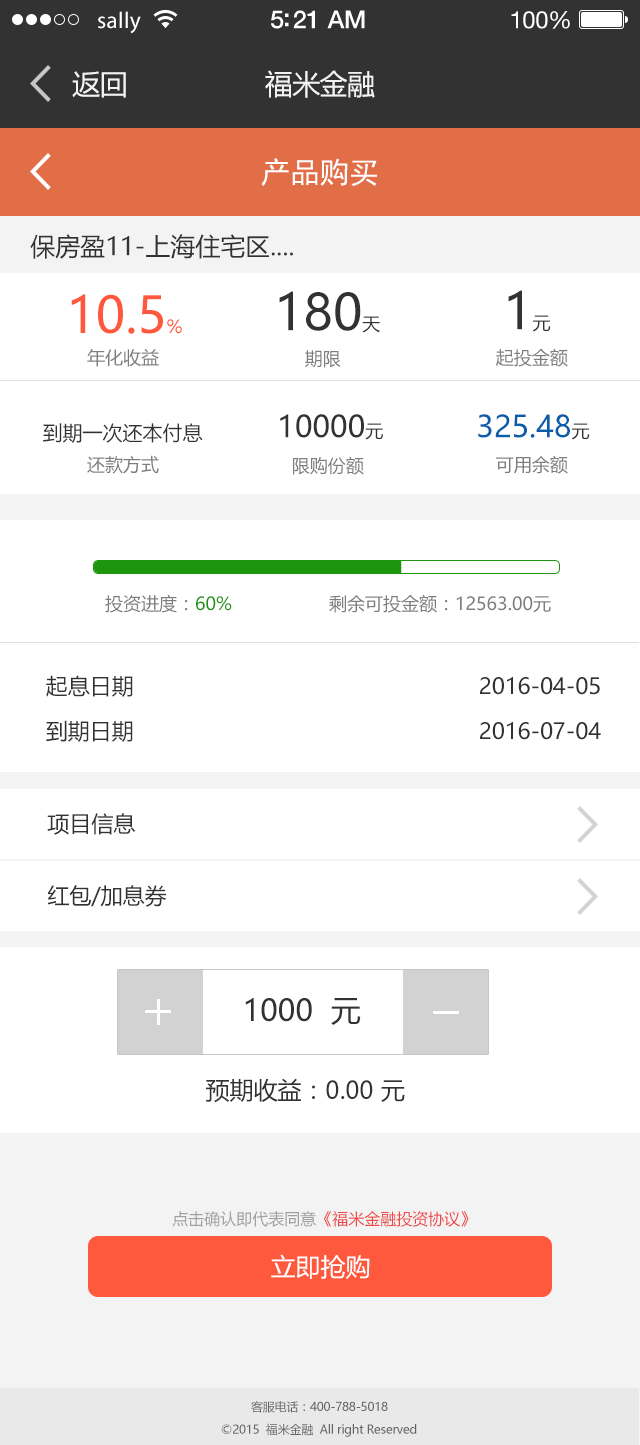
<style>
.page{position:relative;width:640px;height:1445px;background:#ffffff}
.page>*{position:absolute;margin:0}
.t1{font:23px "MyriadPro-Regular";letter-spacing:0.02em;color:#ffffff}
.t2{font:25px "HelveticaNeue-Medium";letter-spacing:-0.02em;color:#ffffff}
.t3{font:24px "HelveticaNeue";letter-spacing:-0.02em;color:#ffffff}
.t4{font:28px "MicrosoftYaHei";letter-spacing:-0.02em;color:#f3f3f3}
.t5{font:30px "SimHei";letter-spacing:-0.02em;color:#ffffff}
.t6{font:25px "MicrosoftYaHei";color:#323232}
.t7{font:50px "MicrosoftYaHei";color:#ff593d}
.t8{font:18px "MicrosoftYaHei";color:#ff593d}
.t9{font:50px "MicrosoftYaHei";color:#323232}
.t10{font:18px "MicrosoftYaHei";color:#323232}
.t11{font:18px "MicrosoftYaHei";color:#7d7d7d}
.t12{font:30px "MicrosoftYaHei";color:#323232}
.t13{font:30px "MicrosoftYaHei";color:#0a5dab}
.t14{font:20px "MicrosoftYaHei";color:#323232}
.t15{font:18px "MicrosoftYaHei";color:#1e950e}
.t16{font:22px "MicrosoftYaHei";color:#323232}
.t17{font:24px "MicrosoftYaHei";color:#323232}
.t18{font:16px "MicrosoftYaHei";color:#ed4949}
.t19{font:16px "MicrosoftYaHei";color:#a0a0a0}
.t20{font:25px "MicrosoftYaHei";color:#ffffff}
.t21{font:12px "MicrosoftYaHei";letter-spacing:-0.02em;color:#646464}
</style>
<div class="page">
<p class="t1" style="left:98px;top:11px;width:43px;height:23px">sally</p>
<p class="t2" style="left:271px;top:10px;width:94px;height:19px">5:21 AM</p>
<p class="t3" style="left:511px;top:11px;width:59px;height:18px">100%</p>
<p class="t4" style="left:72px;top:71px;width:54px;height:27px">返回</p>
<p class="t4" style="left:265px;top:70px;width:110px;height:28px">福米金融</p>
<p class="t5" style="left:261px;top:158px;width:116px;height:28px">产品购买</p>
<p class="t6" style="left:30px;top:234px;width:263px;height:25px">保房盈11-上海住宅区....</p>
<p class="t7" style="left:71px;top:294px;width:111px;height:40px">10.5<span class="t8">%</span></p>
<p class="t9" style="left:279px;top:291px;width:101px;height:42px">180<span class="t10">天</span></p>
<p class="t9" style="left:508px;top:290px;width:43px;height:42px">1<span class="t10">元</span></p>
<p class="t11" style="left:87px;top:349px;width:72px;height:18px">年化收益</p>
<p class="t11" style="left:305px;top:350px;width:36px;height:18px">期限</p>
<p class="t11" style="left:496px;top:348px;width:72px;height:19px">起投金额</p>
<p class="t12" style="left:280px;top:414px;width:103px;height:26px">10000<span class="t10">元</span></p>
<p class="t13" style="left:478px;top:414px;width:112px;height:26px">325.48<span class="t10">元</span></p>
<p class="t14" style="left:43px;top:423px;width:160px;height:20px">到期一次还本付息</p>
<p class="t11" style="left:87px;top:455px;width:72px;height:19px">还款方式</p>
<p class="t11" style="left:293px;top:456px;width:71px;height:19px">限购份额</p>
<p class="t11" style="left:496px;top:455px;width:72px;height:19px">可用余额</p>
<p class="t11" style="left:105px;top:594px;width:127px;height:19px">投资进度：<span class="t15">60%</span></p>
<p class="t11" style="left:329px;top:594px;width:222px;height:19px">剩余可投金额：12563.00元</p>
<p class="t16" style="left:46px;top:675px;width:554px;height:22px">起息日期                                                     2016-04-05</p>
<p class="t16" style="left:46px;top:720px;width:555px;height:22px">到期日期                                                     2016-07-04</p>
<p class="t16" style="left:47px;top:813px;width:89px;height:22px">项目信息</p>
<p class="t16" style="left:47px;top:885px;width:120px;height:22px">红包/加息券</p>
<p class="t12" style="left:245px;top:998px;width:116px;height:27px">1000  元</p>
<p class="t17" style="left:206px;top:1078px;width:199px;height:25px">预期收益：0.00 元</p>
<p class="t18" style="left:172px;top:1211px;width:297px;height:16px"><span class="t19">点击确认即代表同意</span>《福米金融投资协议》</p>
<p class="t20" style="left:271px;top:1254px;width:99px;height:25px">立即抢购</p>
<p class="t21" style="left:251px;top:1401px;width:137px;height:12px">客服电话：400-788-5018</p>
<p class="t21" style="left:221px;top:1423px;width:196px;height:14px">©2015  福米金融  All right Reserved</p>
</div>
